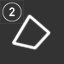
<style>
.page{position:relative;width:64px;height:64px;background:#333333}
.page>*{position:absolute;margin:0}
.t1{font:12px "DINAlternate-Bold";color:#ffffff}
</style>
<div class="page">
<p class="t1" style="left:9px;top:7px;width:6px;height:10px">2</p>
</div>
